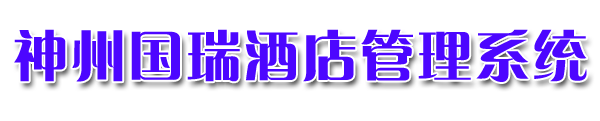
<style>
.page{position:relative;width:600px;height:121px;background:#ffffff}
.page>*{position:absolute;margin:0}
.t1{font:55px "FZCQJW--GB1-0";letter-spacing:0.05em;color:#4c06ff}
</style>
<div class="page">
<p class="t1" style="left:14px;top:29px;width:573px;height:53px">神州国瑞酒店管理系统</p>
</div>
